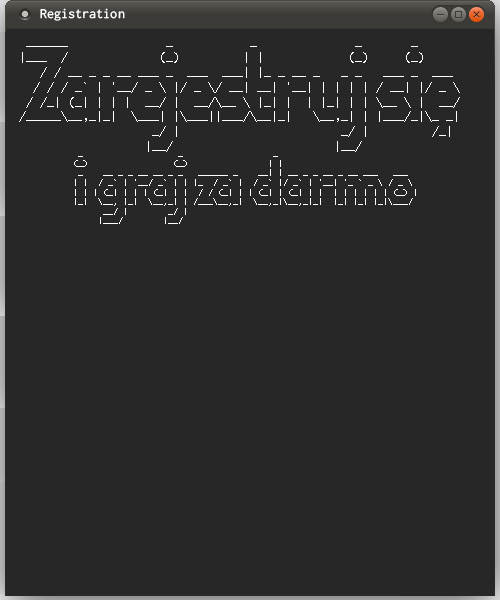
<style>
.page{position:relative;width:500px;height:600px;background:#272727}
.page>*{position:absolute;margin:0}
.t1{font:14px "Inconsolata";color:#ffffff}
.t2{font:12.3px "LucidaConsole";color:#ffffff}
.t3{font:8px "LucidaConsole";color:#ffffff}
</style>
<div class="page">
<p class="t1" style="left:40px;top:8px;width:85px;height:13px">Registration</p>
<p class="t2" style="left:19px;top:46px;width:441px;height:106px">______              _           _              _       _      <br> |___  /             (_)         | |            (_)     (_)     <br>    / / __ _ _ __ ___ _  ___  ___| |_ _ __ _   _ _   ___ _  ___ <br>   / / / _` | '__/ _ \ |/ _ \/ __| __| '__| | | | | / __| |/ _ \<br>  / /_| (_| | | |  __/ |  __/\__ \ |_| |  | |_| | | \__ \ |  __/<br> /_____\__,_|_|  \___| |\___||___/\__|_|   \__,_| | |___/_|\_ _|<br>                    _/ |                       _/ |         /_| <br>                   |__/                       |__/</p>
<p class="t3" style="left:74px;top:156px;width:342px;height:68px">_                   _                  _                            <br> (_)                 (_)                | |                           <br>  _    __ _ _ __ __ _ _   ______ _    __| | __ _ _ __ _ __ ___   ___  <br> | |  / _` | '__/ _` | | |_  / _` |  / _` |/ _` | '__| '_ ` _ \ / _ \ <br> | | | (_| | | | (_| | |  / / (_| | | (_| | (_| | |  | | | | | | (_) |<br> |_|  \__, |_|  \__,_| | /___\__,_|  \__,_|\__,_|_|  |_| |_| |_|\___/ <br>       __/ |        _/ |                                              <br>      |___/        |__/</p>
</div>
